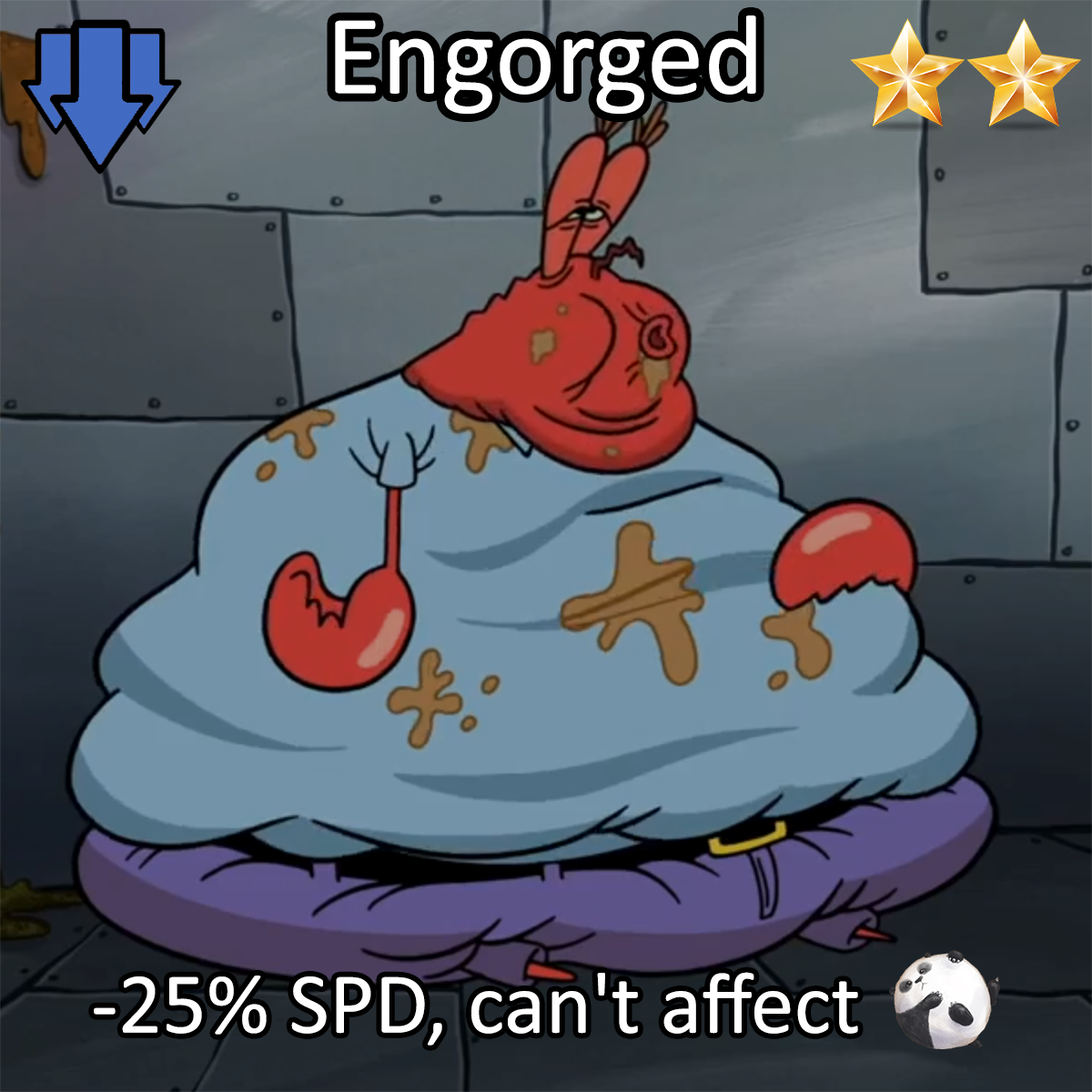
<style>
.page{position:relative;width:1092px;height:1092px}
.page>*{position:absolute;margin:0}
.t1{font:196.6px "Calibri";color:#ffffff}
.t2{font:150.1px "Calibri";color:#ffffff}
</style>
<div class="page">
<p class="t1" style="left:335px;top:15px;width:421px;height:99px">Engorged</p>
<p class="t2" style="left:94px;top:972px;width:764px;height:74px">-25% SPD, can't affect</p>
</div>
